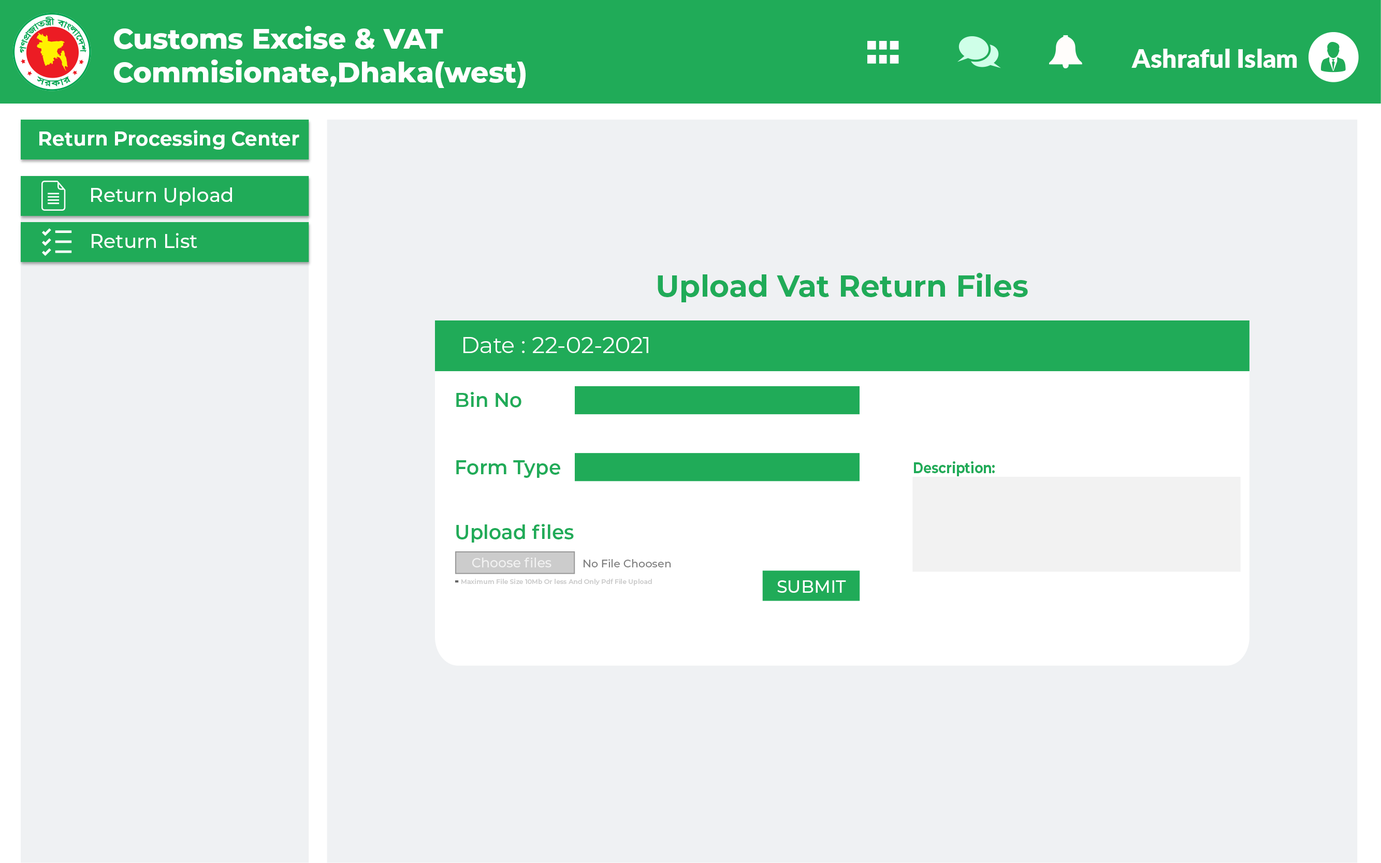
<style>
.page{position:relative;width:1381px;height:863px;background:#eff1f3}
.page>*{position:absolute;margin:0}
.t1{font:28.1px "Montserrat-ExtraBold";color:#ffffff}
.t2{font:25.9px "Lato-Black";color:#ffffff}
.t3{font:19.4px "Montserrat-Bold";color:#ffffff}
.t4{font:19.4px "Montserrat-Medium";color:#ffffff}
.t5{font:30.2px "Montserrat-Bold";color:#20ab58}
.t6{font:22.7px "Montserrat-Regular";color:#ffffff}
.t7{font:19.4px "Montserrat-SemiBold";color:#20ab58}
.t8{font:15.1px "Montserrat-Bold";color:#20ab58;scale:0.86 1}
.t9{font:12.9px "Montserrat-Medium";color:#f2f2f2}
.t10{font:10.8px "Montserrat-Medium";color:#808080}
.t11{font:6.5px "Montserrat-SemiBold";color:#cccccc}
.t12{font:17.3px "Montserrat-Medium";color:#ffffff}
</style>
<div class="page">
<p class="t1" style="left:114px;top:26px;width:412px;height:62px">Customs Excise &amp; VAT<br>Commisionate,Dhaka(west)</p>
<p class="t2" style="left:1132px;top:49px;width:165px;height:19px">Ashraful Islam</p>
<p class="t3" style="left:39px;top:130px;width:260px;height:20px">Return Processing Center</p>
<p class="t4" style="left:91px;top:187px;width:141px;height:19px">Return Upload</p>
<p class="t4" style="left:92px;top:233px;width:105px;height:15px">Return List</p>
<p class="t5" style="left:658px;top:273px;width:370px;height:29px">Upload Vat Return Files</p>
<p class="t6" style="left:464px;top:337px;width:184px;height:16px">Date : 22-02-2021</p>
<p class="t7" style="left:456px;top:392px;width:66px;height:16px">Bin No</p>
<p class="t7" style="left:456px;top:460px;width:104px;height:18px">Form Type</p>
<p class="t8" style="left:914px;top:461px;width:81px;height:15px">Description:</p>
<p class="t7" style="left:456px;top:524px;width:118px;height:19px">Upload files</p>
<p class="t9" style="left:472px;top:558px;width:80px;height:10px">Choose files</p>
<p class="t10" style="left:584px;top:559px;width:87px;height:9px">No File Choosen</p>
<p class="t11" style="left:461px;top:579px;width:191px;height:7px">Maximum File Size 10Mb Or less And Only Pdf File Upload</p>
<p class="t12" style="left:777px;top:581px;width:69px;height:12px">SUBMIT</p>
</div>
